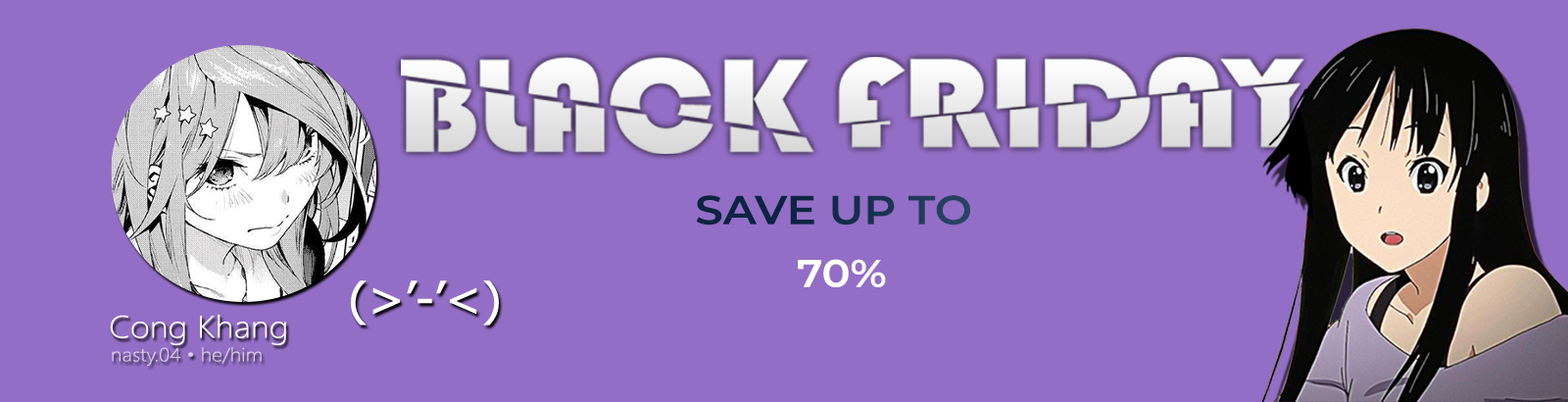
<style>
.page{position:relative;width:1568px;height:402px;background:#936ec6}
.page>*{position:absolute;margin:0}
.t1{font:40.3px "Montserrat-SemiBold";letter-spacing:0.002em;color:#0e2745;scale:1.1 1}
.t2{font:38.3px "Montserrat-SemiBold";letter-spacing:0.002em;color:#ffffff;scale:1.1 1}
.t3{font:46.1px "Tahoma";letter-spacing:0.002em;color:#ffffff;scale:1.1 1}
.t4{font:31.3px "SegoeUI-Light";letter-spacing:0.002em;color:#ffffff;scale:1.1 1}
.t5{font:19px "SegoeUI-Light";letter-spacing:0.002em;color:#d7cee4;scale:1.1 1}
</style>
<div class="page">
<p class="t1" style="left:696px;top:195px;width:275px;height:30px">SAVE UP TO</p>
<p class="t2" style="left:798px;top:259px;width:88px;height:28px">70%</p>
<p class="t3" style="left:351px;top:280px;width:148px;height:45px">(&gt;’-’&lt;)</p>
<p class="t4" style="left:110px;top:314px;width:176px;height:31px">Cong Khang</p>
<p class="t5" style="left:112px;top:347px;width:150px;height:19px">nasty.04 • he/him</p>
</div>
